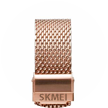
<style>
.page{position:relative;width:108px;height:108px;background:#fefefe}
.page>*{position:absolute;margin:0}
.t1{font:10px "MyriadPro-Bold";color:#825c45}
</style>
<div class="page">
<p class="t1" style="left:39px;top:93px;width:28px;height:8px">SKMEI</p>
</div>
